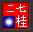
<style>
.page{position:relative;width:33px;height:32px;background:#f20000}
.page>*{position:absolute;margin:0}
.t1{font:10.4px "SimSun";color:#ffffff}
.t2{font:11.7px "SimSun";color:#ffffff}
</style>
<div class="page">
<p class="t1" style="left:7px;top:4px;width:19px;height:8px">二七</p>
<p class="t2" style="left:16px;top:15px;width:11px;height:12px">桂</p>
</div>
